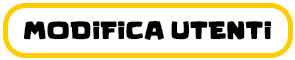
<style>
.page{position:relative;width:295px;height:60px;background:#ffffff}
.page>*{position:absolute;margin:0}
.t1{font:25px "KidGames";color:#000000}
</style>
<div class="page">
<p class="t1" style="left:23px;top:20px;width:249px;height:20px">MODIFICA UTENTI</p>
</div>
